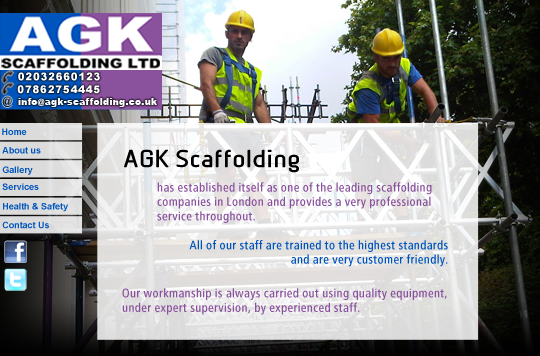
<style>
.page{position:relative;width:540px;height:356px}
.page>*{position:absolute;margin:0}
.t1{font:10.6px "Arial-Black";letter-spacing:0.05em;color:#ffffff}
.t2{font:12.3px "Arial-Black";letter-spacing:0.05em;color:#1c1c1c}
.t3{font:8.8px "Arial-Black";letter-spacing:0.05em;color:#ffffff}
.t4{font:8.9px "Arial-BoldMT";color:#0055bd}
.t5{font:24px "BetaSans-Bold";color:#000000}
.t6{font:12px "BVGNegAuf";color:#8a519d}
.t7{font:12px "BVGNegAuf";color:#0055bd}
</style>
<div class="page">
<p class="t1" style="left:18px;top:72px;width:82px;height:9px">02032660123</p>
<p class="t1" style="left:17px;top:85px;width:83px;height:9px">07862754445</p>
<p class="t2" style="left:2px;top:96px;width:10px;height:11px">@</p>
<p class="t3" style="left:18px;top:98px;width:139px;height:9px">info@agk-scaffolding.co.uk</p>
<p class="t4" style="left:2px;top:128px;width:25px;height:7px">Home</p>
<p class="t4" style="left:2px;top:147px;width:39px;height:7px">About us</p>
<p class="t5" style="left:124px;top:149px;width:175px;height:24px">AGK Scaffolding</p>
<p class="t4" style="left:2px;top:166px;width:31px;height:9px">Gallery</p>
<p class="t4" style="left:2px;top:183px;width:37px;height:7px">Services</p>
<p class="t6" style="left:157px;top:182px;width:275px;height:41px">has established itself as one of the leading scaffolding<br>companies in London and provides a very professional <br>service throughout.</p>
<p class="t4" style="left:3px;top:203px;width:65px;height:9px">Health &amp; Safety</p>
<p class="t4" style="left:2px;top:221px;width:47px;height:8px">Contact Us</p>
<p class="t7" style="left:189px;top:240px;width:259px;height:27px;text-align:right">All of our staff are trained to the highest standards<br>and are very customer friendly.</p>
<p class="t6" style="left:122px;top:288px;width:325px;height:27px">Our workmanship is always carried out using quality equipment,<br>under expert supervision, by experienced staff.</p>
</div>
